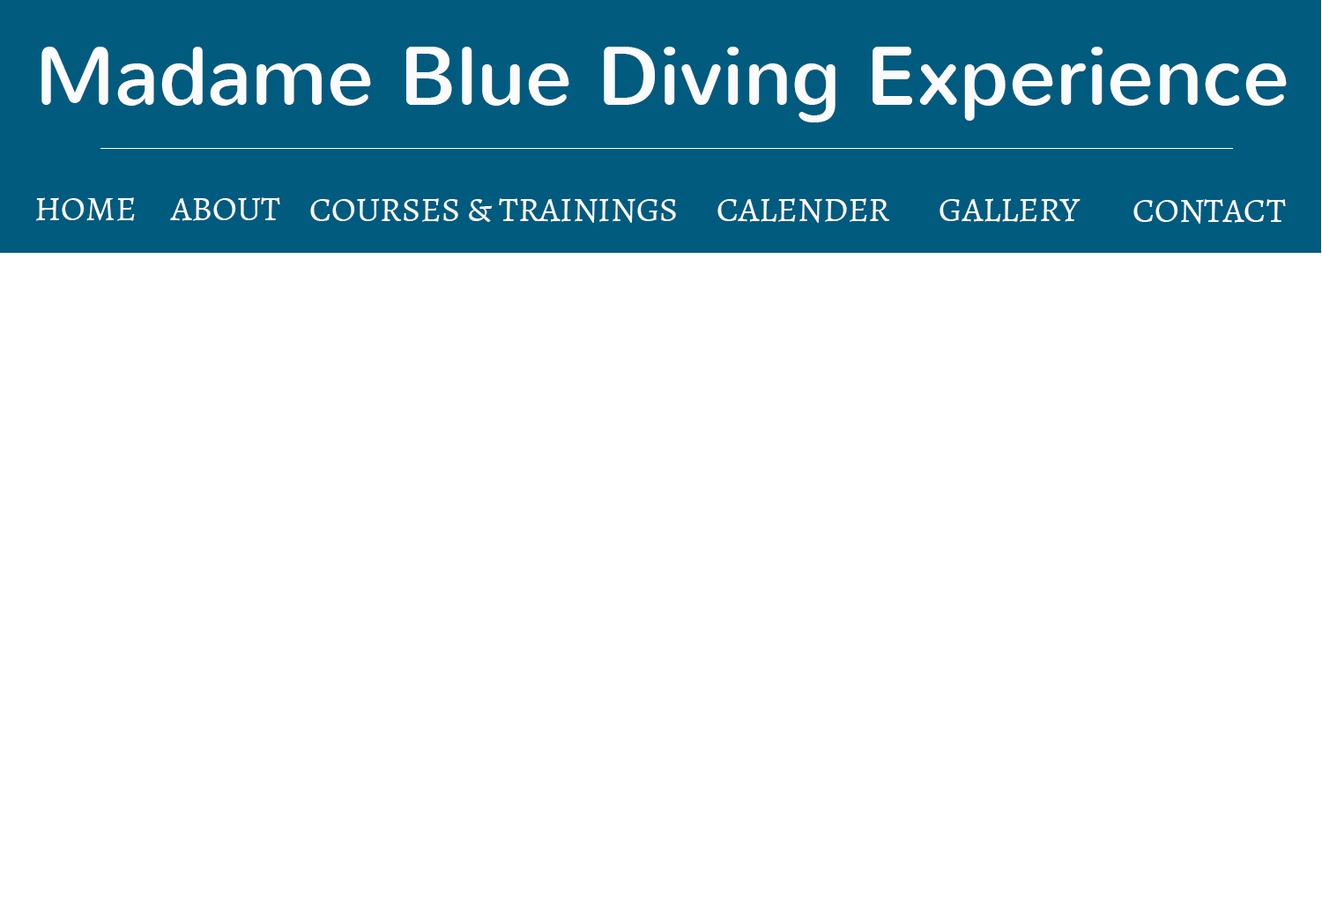
<style>
.page{position:relative;width:1322px;height:902px;background:#ffffff}
.page>*{position:absolute;margin:0}
.t1{font:82.8px "Nunito-Regular";color:#fcfbfb}
.t2{font:35.2px "Alegreya-Regular";color:#fcfbfb}
</style>
<div class="page">
<p class="t1" style="left:41px;top:47px;width:1245px;height:75px">Madame Blue Diving Experience</p>
<p class="t2" style="left:36px;top:197px;width:99px;height:24px">HOME</p>
<p class="t2" style="left:170px;top:197px;width:110px;height:24px">ABOUT</p>
<p class="t2" style="left:310px;top:198px;width:366px;height:25px">COURSES &amp; TRAININGS</p>
<p class="t2" style="left:717px;top:198px;width:173px;height:25px">CALENDER</p>
<p class="t2" style="left:939px;top:198px;width:141px;height:24px">GALLERY</p>
<p class="t2" style="left:1133px;top:199px;width:153px;height:25px">CONTACT</p>
</div>
